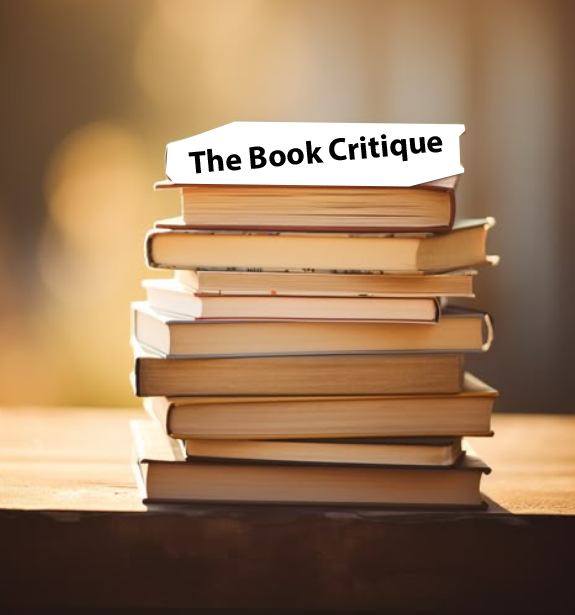
<style>
.page{position:relative;width:575px;height:615px}
.page>*{position:absolute;margin:0}
.t1{font:32px "MyriadPro-Bold";color:#000000}
</style>
<div class="page">
<p class="t1" style="left:188px;top:134px;width:255px;height:40px;rotate:-5deg">The Book Critique</p>
</div>
